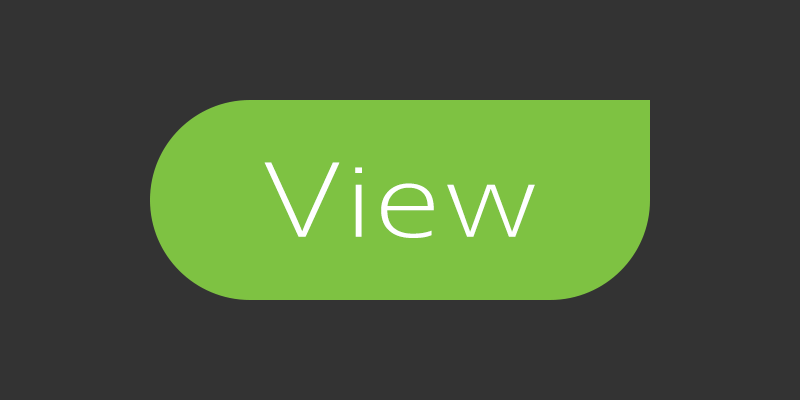
<style>
.page{position:relative;width:800px;height:400px;background:#333333}
.page>*{position:absolute;margin:0}
.t1{font:113.1px "CorbelLight";color:#ffffff;scale:1.26 1}
</style>
<div class="page">
<p class="t1" style="left:264px;top:162px;width:271px;height:76px">View</p>
</div>
